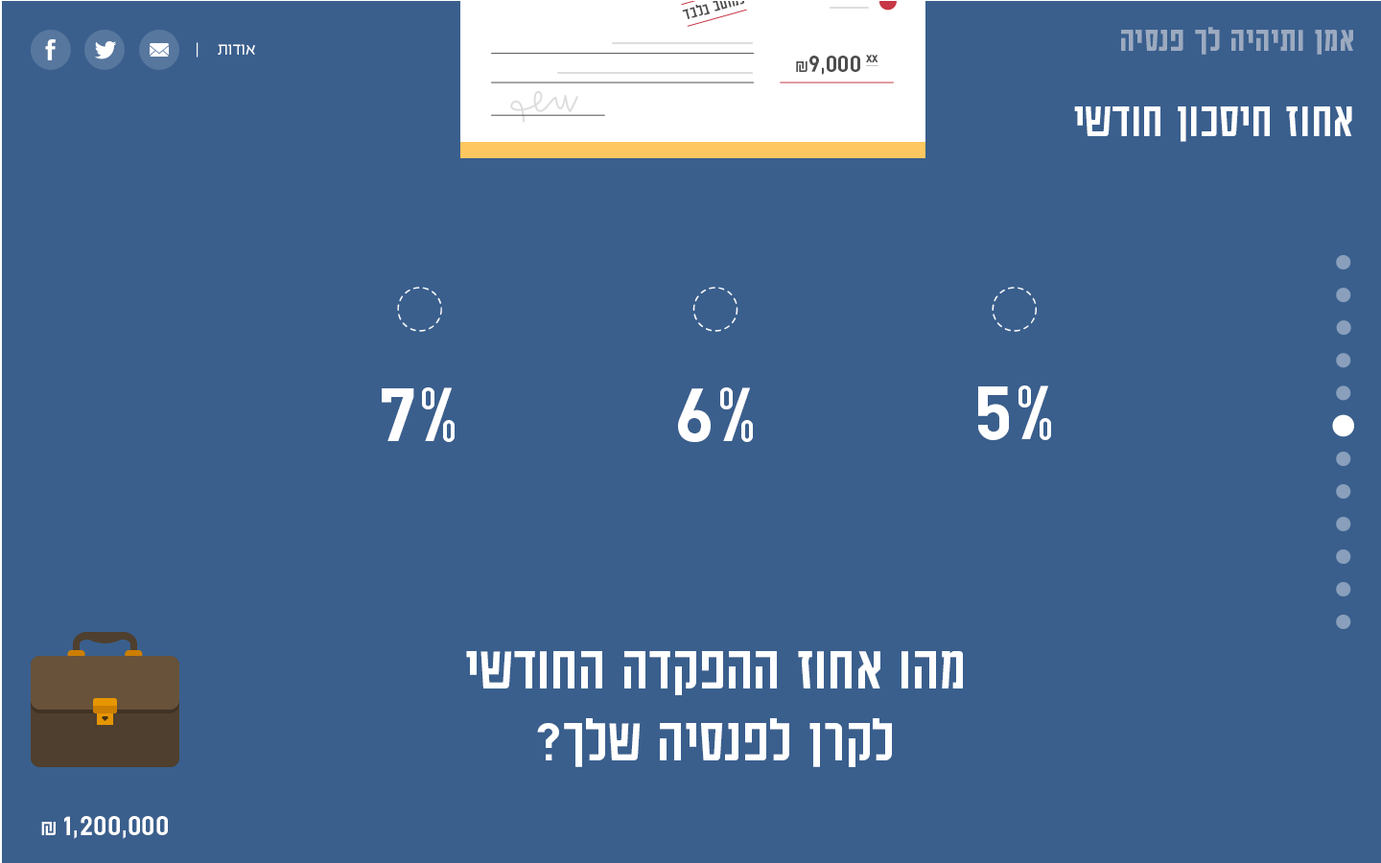
<style>
.page{position:relative;width:1381px;height:863px;background:#3a5f8d}
.page>*{position:absolute;margin:0}
.t1{font:37.8px "AdumaFOT-Medium";color:#9caac0}
.t2{font:19.2px "EzerBlock_OE-Light";color:#ffffff}
.t3{font:28.7px "AdumaFOT-Regular";color:#4d4d4d}
.t4{font:19.2px "AdumaFOT-Regular";color:#4d4d4d}
.t5{font:28.7px "AdumaFOT-Regular";color:#4d4d4d;text-decoration:underline}
.t6{font:53.8px "AdumaFOT-Regular";color:#ffffff}
.t7{font:95.9px "AdumaFOT-Regular";color:#ffffff}
.t8{font:67.1px/71.9px "AdumaFOT-Regular";color:#ffffff}
.t9{font:33.6px "AdumaFOT-Regular";color:#ffffff}
.t10{font:24px "AdumaFOT-Regular";color:#ffffff}
</style>
<div class="page">
<p class="t1" style="left:1121px;top:27px;width:232px;height:28px">אמן ותיהיה לך פנסיה</p>
<p class="t2" style="left:197px;top:42px;width:58px;height:16px">אודות     |</p>
<p class="t3" style="left:796px;top:55px;width:83px;height:20px"><span class="t4">₪</span>9,000 <span class="t5">xx</span></p>
<p class="t6" style="left:1074px;top:106px;width:278px;height:36px">אחוז חיסכון חודשי</p>
<p class="t7" style="left:382px;top:388px;width:73px;height:54px">7%</p>
<p class="t7" style="left:678px;top:388px;width:75px;height:54px">6%</p>
<p class="t7" style="left:978px;top:386px;width:73px;height:54px">5%</p>
<p class="t8" style="left:466px;top:651px;width:497px;height:116px;text-align:center">מהו אחוז ההפקדה החודשי<br>לקרן לפנסיה שלך?</p>
<p class="t9" style="left:41px;top:816px;width:127px;height:23px">1,200,000<span class="t10"> ₪</span></p>
</div>
